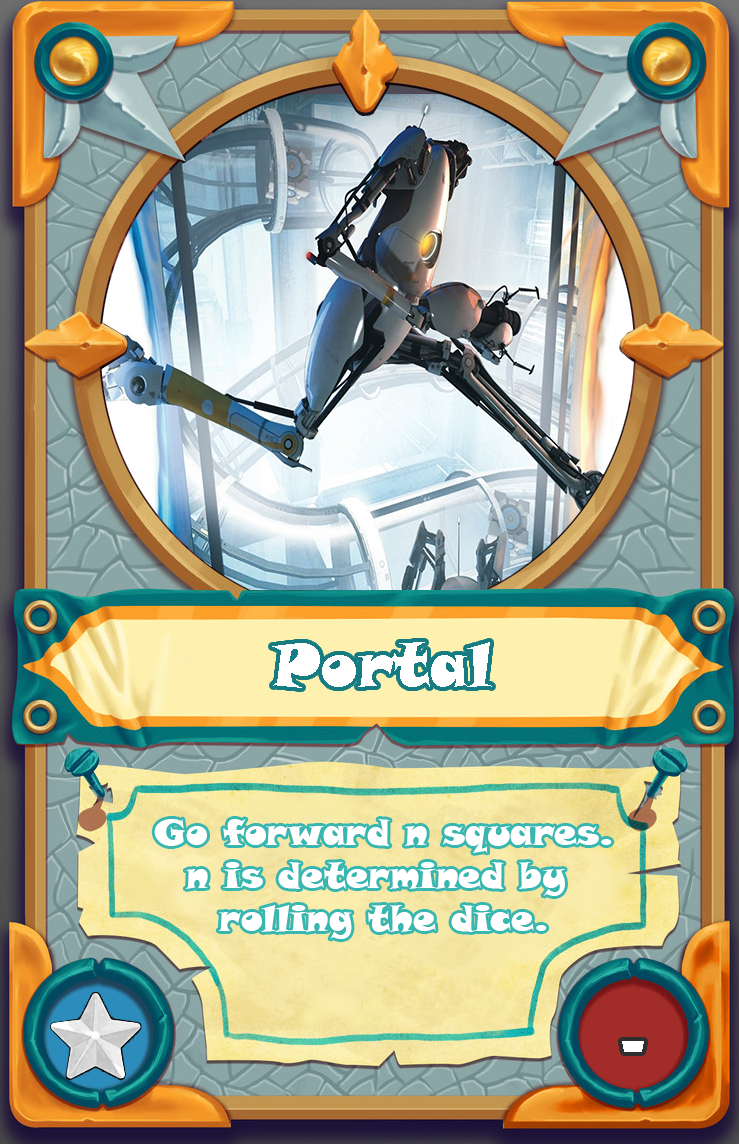
<style>
.page{position:relative;width:739px;height:1144px}
.page>*{position:absolute;margin:0}
.t1{font:60px "SnapITC-Regular";color:#ffffff}
.t2{font:36px "SnapITC-Regular";color:#ffffff}
.t3{font:72px "ShowcardGothic-Reg";color:#ffffff}
</style>
<div class="page">
<p class="t1" style="left:272px;top:642px;width:220px;height:46px">Portal</p>
<p class="t2" style="left:154px;top:819px;width:458px;height:120px;text-align:center">Go forward n squares.<br>n is determined by <br>rolling the dice.</p>
<p class="t3" style="left:622px;top:1041px;width:22px;height:11px">-</p>
</div>
